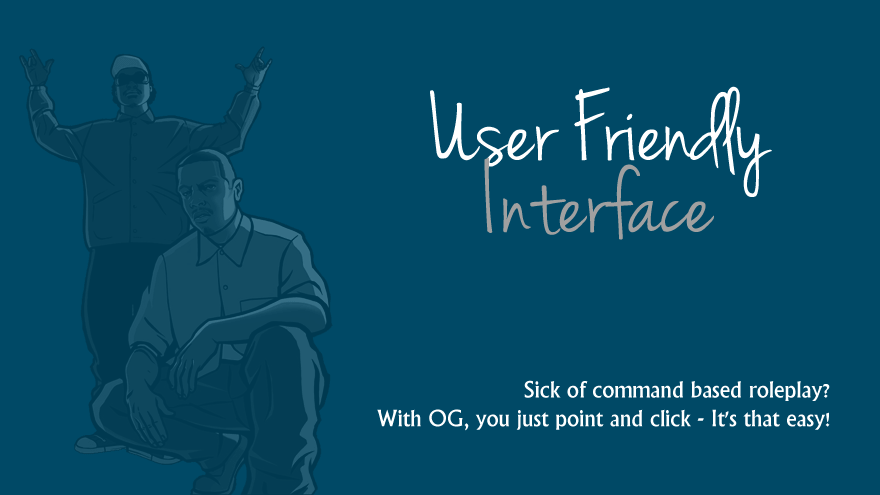
<style>
.page{position:relative;width:880px;height:495px;background:#004966}
.page>*{position:absolute;margin:0}
.t1{font:105px/72px "JennaSue";color:#ffffff}
.t2{font:105px/72px "JennaSue";color:#a0a0a0}
.t3{font:24px "Narkisim";color:#ffffff}
</style>
<div class="page">
<p class="t1" style="left:430px;top:86px;width:342px;height:154px;text-align:center">User Friendly <br><span class="t2">Interface</span></p>
<p class="t3" style="left:377px;top:380px;width:453px;height:51px;text-align:right">Sick of command based roleplay? <br>With OG, you just point and click - It's that easy!</p>
</div>
